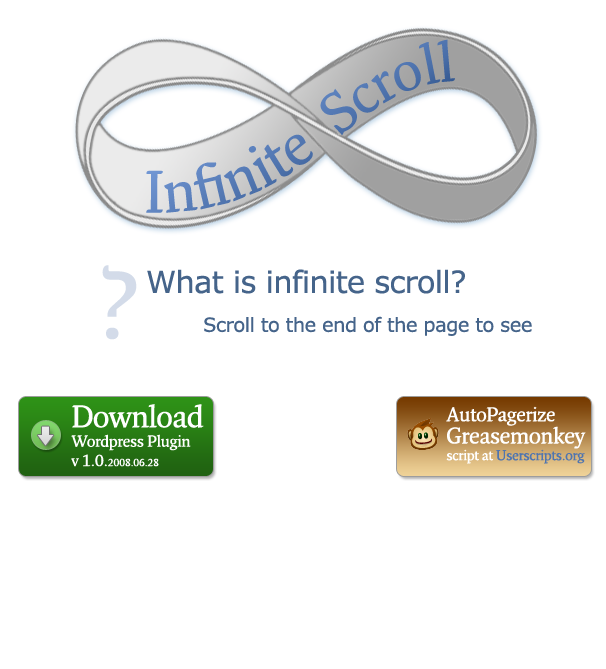
<style>
.page{position:relative;width:606px;height:669px;background:#ffffff}
.page>*{position:absolute;margin:0}
.t1{font:58.3px/33.3px "FrescoStd-SemiBold";color:#5378b3}
.t2{font:16.7px/33.3px "FrescoStd-SemiBold";color:#5378b3}
.t3{font:55.6px/33.3px "FrescoStd-SemiBold";letter-spacing:-0.025em;color:#5378b3}
.t4{font:97.3px "FrescoStd-SemiBold";letter-spacing:-0.025em;color:#d3dbe9}
.t5{font:19.4px/19.4px "Verdana";letter-spacing:-0.025em;color:#45648a}
.t6{font:30.6px/19.4px "Verdana";letter-spacing:-0.025em;color:#45648a}
.t7{font:15.7px/19.4px "FrescoStd-SemiBold";letter-spacing:-0.025em;color:#ffffff}
.t8{font:30.6px/19.4px "FrescoStd-SemiBold";letter-spacing:-0.025em;color:#ffffff}
.t9{font:10.1px/19.4px "FrescoStd-SemiBold";letter-spacing:-0.025em;color:#ffffff}
.t10{font:13.9px "FrescoStd-SemiBold";letter-spacing:-0.025em;color:#5075af}
.t11{font:19.4px/25px "FrescoStd-SemiBold";letter-spacing:-0.025em;color:#ffffff}
.t12{font:22.2px/22.2px "FrescoStd-SemiBold";letter-spacing:-0.025em;color:#ffffff}
.t13{font:13.9px "FrescoStd-SemiBold";letter-spacing:-0.025em;color:#ffffff}
</style>
<div class="page">
<p class="t1" style="left:146px;top:39px;width:309px;height:174px"><span class="t2"> </span>Infinite  <span class="t3">Scroll</span></p>
<p class="t4" style="left:102px;top:265px;width:35px;height:75px">?</p>
<p class="t5" style="left:147px;top:269px;width:385px;height:67px"><span class="t6">What is infinite scroll?<br><br>         </span>Scroll to the end of the page to see</p>
<p class="t7" style="left:71px;top:404px;width:133px;height:63px"><span class="t8">Download<br></span>Wordpress Plugin<br>v 1.0.<span class="t9">2008.06.28</span></p>
<p class="t10" style="left:446px;top:406px;width:140px;height:58px"><span class="t11">AutoPagerize<br></span><span class="t12">Greasemonkey<br></span><span class="t13">script at </span>Userscripts.org</p>
</div>
